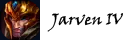
<style>
.page{position:relative;width:140px;height:40px;background:#ffffff}
.page>*{position:absolute;margin:0}
.t1{font:12px "VinerHandITC";color:#000000}
</style>
<div class="page">
<p class="t1" style="left:47px;top:13px;width:76px;height:19px">Jarven IV</p>
</div>
